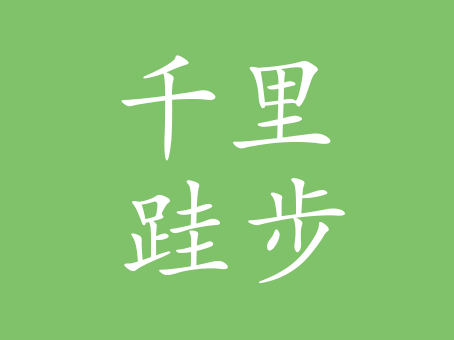
<style>
.page{position:relative;width:454px;height:340px;background:#80c269}
.page>*{position:absolute;margin:0}
.t1{font:120.2px "AdobeKaitiStd-Regular";color:#ffffff;scale:0.96 1}
.t2{font:120.2px "AdobeKaitiStd-Regular";color:#ffffff}
</style>
<div class="page">
<p class="t1" style="left:121px;top:55px;width:210px;height:106px">千里</p>
<p class="t2" style="left:124px;top:178px;width:221px;height:106px">跬步</p>
</div>
